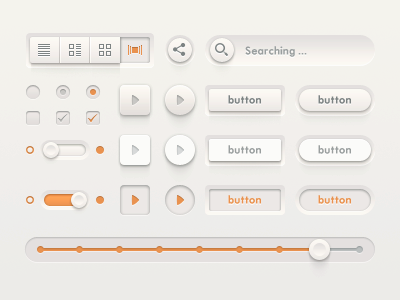
<style>
.page{position:relative;width:400px;height:300px}
.page>*{position:absolute;margin:0}
.t1{font:10.8px "MotorOil1937M54";color:#aaaaaa}
.t2{font:10.8px "Arial-BoldMT";color:#aaaaaa}
.t3{font:10.8px "MotorOil1937M54";color:#7d8383}
.t4{font:10.8px "MotorOil1937M54";color:#e99250}
</style>
<div class="page">
<p class="t1" style="left:245px;top:46px;width:62px;height:11px">Searching <span class="t2">...</span></p>
<p class="t3" style="left:228px;top:95px;width:33px;height:9px">button</p>
<p class="t3" style="left:318px;top:95px;width:33px;height:9px">button</p>
<p class="t1" style="left:228px;top:145px;width:33px;height:9px">button</p>
<p class="t1" style="left:318px;top:145px;width:33px;height:9px">button</p>
<p class="t4" style="left:228px;top:195px;width:33px;height:9px">button</p>
<p class="t4" style="left:318px;top:195px;width:33px;height:9px">button</p>
</div>
